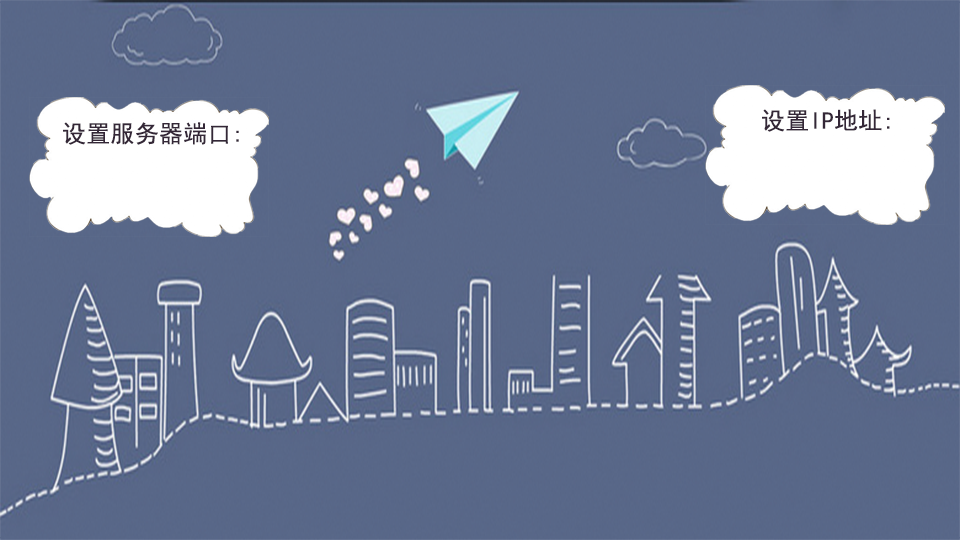
<style>
.page{position:relative;width:960px;height:540px;background:#586788}
.page>*{position:absolute;margin:0}
.t1{font:24px "SimHei";letter-spacing:0.01em;color:#342737}
</style>
<div class="page">
<p class="t1" style="left:762px;top:109px;width:128px;height:23px">设置IP地址:</p>
<p class="t1" style="left:63px;top:122px;width:176px;height:23px">设置服务器端口:</p>
</div>
